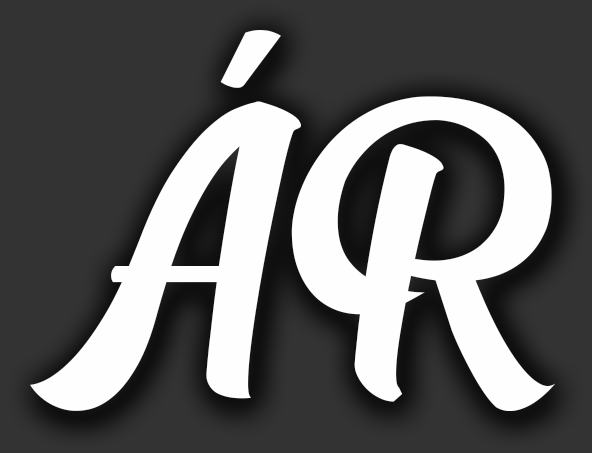
<style>
.page{position:relative;width:592px;height:453px;background:#333333}
.page>*{position:absolute;margin:0}
.t1{font:300px "Dalgona";color:#fefefe}
</style>
<div class="page">
<p class="t1" style="left:30px;top:30px;width:525px;height:381px">ÁR</p>
</div>
